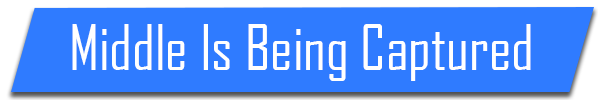
<style>
.page{position:relative;width:598px;height:100px;background:#2f7bff}
.page>*{position:absolute;margin:0}
.t1{font:60px "AgencyFB-Reg";color:#ffffff}
</style>
<div class="page">
<p class="t1" style="left:72px;top:24px;width:459px;height:57px">Middle Is Being Captured</p>
</div>
